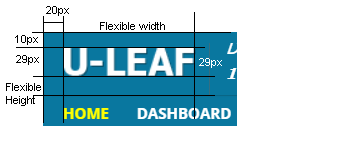
<style>
.page{position:relative;width:340px;height:142px;background:#ffffff}
.page>*{position:absolute;margin:0}
.t1{font:11px "ArialMT";color:#000000}
.t2{font:11px "ArialMT";color:#ffffff}
</style>
<div class="page">
<p class="t1" style="left:46px;top:6px;width:23px;height:10px">20px</p>
<p class="t1" style="left:100px;top:22px;width:65px;height:8px">Flexible width</p>
<p class="t1" style="left:15px;top:35px;width:23px;height:10px">10px</p>
<p class="t1" style="left:16px;top:55px;width:23px;height:10px">29px</p>
<p class="t2" style="left:199px;top:58px;width:23px;height:10px">29px</p>
<p class="t1" style="left:6px;top:83px;width:35px;height:23px">Flexible<br>Height</p>
</div>
